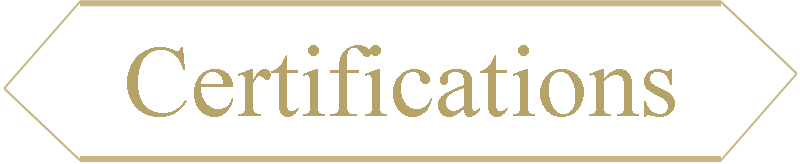
<style>
.page{position:relative;width:800px;height:164px;background:#ffffff}
.page>*{position:absolute;margin:0}
.t1{font:102px "TimesNewRomanPSMT";color:#b5a36a}
</style>
<div class="page">
<p class="t1" style="left:127px;top:45px;width:548px;height:72px">Certifications</p>
</div>
